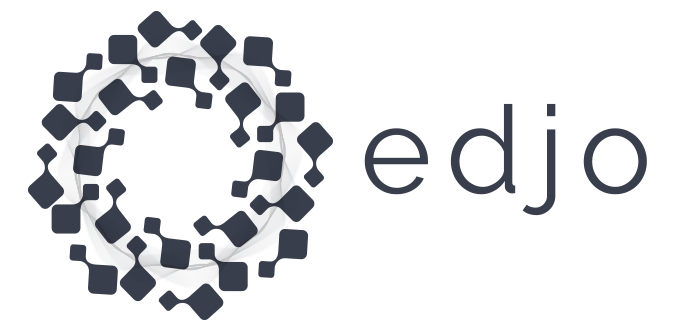
<style>
.page{position:relative;width:680px;height:331px;background:#ffffff}
.page>*{position:absolute;margin:0}
.t1{font:122px "Raleway-Regular";letter-spacing:0.12em;color:#393e4c}
</style>
<div class="page">
<p class="t1" style="left:364px;top:103px;width:283px;height:113px">edjo</p>
</div>
